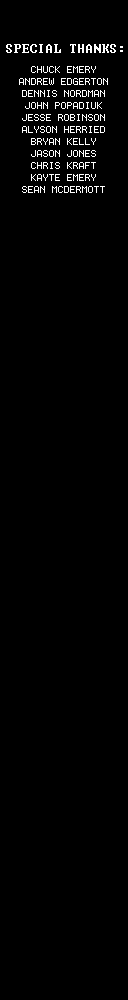
<style>
.page{position:relative;width:128px;height:1000px;background:#000000}
.page>*{position:absolute;margin:0}
.t1{font:12.9px "Terminal";color:#ffffff}
.t2{font:8px/12px "Terminal";color:#ffffff}
</style>
<div class="page">
<p class="t1" style="left:6px;top:44px;width:117px;height:9px">SPECIAL THANKS:</p>
<p class="t2" style="left:19px;top:66px;width:89px;height:127px;text-align:center">CHUCK EMERY<br>ANDREW EDGERTON<br>DENNIS NORDMAN<br>JOHN POPADIUK<br>JESSE ROBINSON<br>ALYSON HERRIED<br>BRYAN KELLY<br>JASON JONES<br>CHRIS KRAFT<br>KAYTE EMERY<br>SEAN MCDERMOTT</p>
</div>
